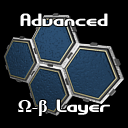
<style>
.page{position:relative;width:128px;height:128px;background:#000000}
.page>*{position:absolute;margin:0}
.t1{font:18px "GravitateBRK";color:#ffffff}
.t2{font:18px "TimesNewRomanPS-BoldMT";color:#ffffff}
</style>
<div class="page">
<p class="t1" style="left:20px;top:13px;width:88px;height:13px">Advanced</p>
<p class="t1" style="left:18px;top:99px;width:92px;height:17px"><span class="t2">Ω-β</span> Layer</p>
</div>
